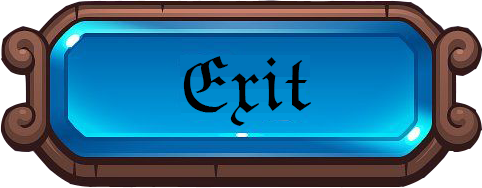
<style>
.page{position:relative;width:482px;height:188px}
.page>*{position:absolute;margin:0}
.t1{font:80px "EuclidFraktur";color:#000000}
</style>
<div class="page">
<p class="t1" style="left:183px;top:56px;width:128px;height:70px">Exit</p>
</div>
